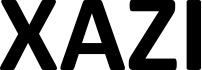
<style>
.page{position:relative;width:202px;height:70px;background:#000000}
.page>*{position:absolute;margin:0}
.t1{font:110.8px "Calibri-Bold";color:#000000}
</style>
<div class="page">
<p class="t1" style="left:0px;top:0px;width:201px;height:71px">XAZI</p>
</div>
